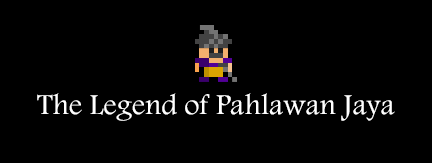
<style>
.page{position:relative;width:432px;height:163px;background:#000000}
.page>*{position:absolute;margin:0}
.t1{font:30px "arabswell_1";color:#ffffff}
</style>
<div class="page">
<p class="t1" style="left:37px;top:93px;width:358px;height:28px">The Legend of Pahlawan Jaya</p>
</div>
